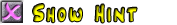
<style>
.page{position:relative;width:177px;height:25px;background:#ffffff}
.page>*{position:absolute;margin:0}
.t1{font:24px "Inkpen2Script";letter-spacing:0.1em;font-weight:bold}
</style>
<div class="page">
<p class="t1" style="left:33px;top:4px;width:104px;height:19px">Show Hint</p>
</div>
